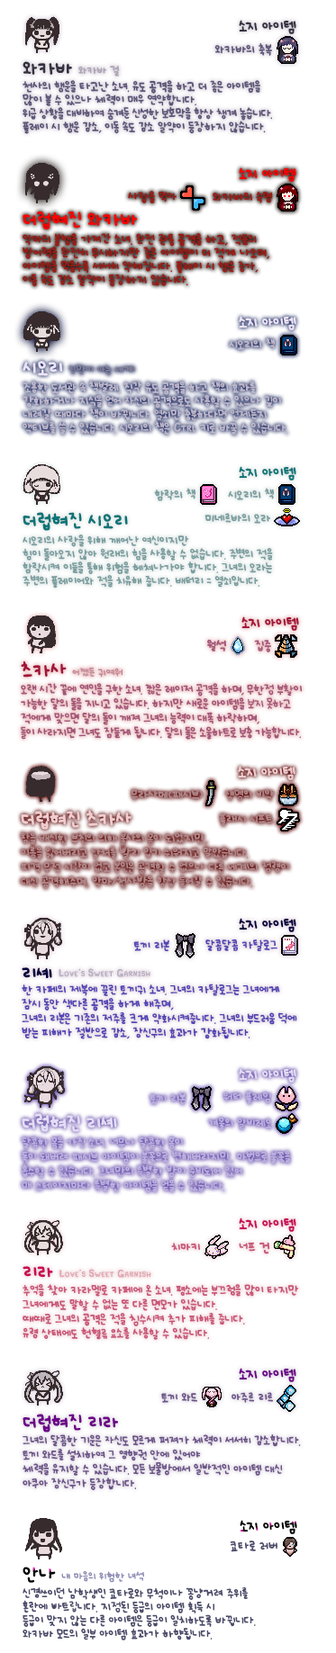
<style>
.page{position:relative;width:336px;height:1653px;background:#ffffff}
.page>*{position:absolute;margin:0}
.t1{font:10.8px "UhBeeSe_hyunBold";color:#34323f}
.t2{font:10.8px "UhBeeSe_hyunBold";letter-spacing:-0.2em;color:#34323f}
.t3{font:9px "UhBeeSe_hyunBold";color:#5b5577}
.t4{font:9px/13.5px "UhBeeSe_hyunBold";letter-spacing:-0.025em;color:#5b5577}
.t5{font:14.4px/20.7px "UhBeeSe_hyunBold";color:#34323f}
.t6{font:8.1px/20.7px "UhBeeSe_hyunBold";color:#aba4b4}
.t7{font:9px/13.5px "UhBeeSe_hyunBold";letter-spacing:-0.05em;color:#5b5577}
.t8{font:10.8px "UhBeeSe_hyunBold";color:#ff0000}
.t9{font:10.8px "UhBeeSe_hyunBold";letter-spacing:-0.2em;color:#ff0000}
.t10{font:9px "UhBeeSe_hyunBold";color:#9a1a15}
.t11{font:9px/13.5px "UhBeeSe_hyunBold";color:#9a1a15}
.t12{font:14.4px/22.5px "UhBeeSe_hyunBold";color:#ff0000}
.t13{font:14.4px/22.5px "UhBeeSe_hyun";color:#ff0000}
.t14{font:10.8px "UhBeeSe_hyunBold";color:#ece4f9}
.t15{font:10.8px "UhBeeSe_hyunBold";letter-spacing:-0.2em;color:#ece4f9}
.t16{font:10.8px "UhBeeSe_hyunBold";color:#0a7577}
.t17{font:10.8px "UhBeeSe_hyunBold";letter-spacing:-0.2em;color:#0a7577}
.t18{font:9px "UhBeeSe_hyunBold";color:#7a9d9e}
.t19{font:9px/13.5px "UhBeeSe_hyunBold";letter-spacing:-0.025em;color:#7a9d9e}
.t20{font:14.4px/22.5px "UhBeeSe_hyunBold";color:#0a7577}
.t21{font:14.4px/22.5px "UhBeeSe_hyunBold";letter-spacing:0.1em;color:#0a7577}
.t22{font:9px/13.5px "UhBeeSe_hyunBold";letter-spacing:-0.159em;color:#7a9d9e}
.t23{font:10.8px "UhBeeSe_hyunBold";color:#a21439}
.t24{font:10.8px "UhBeeSe_hyunBold";letter-spacing:-0.2em;color:#a21439}
.t25{font:9.9px "UhBeeSe_hyunBold";color:#a25577}
.t26{font:9px/14.4px "UhBeeSe_hyunBold";letter-spacing:-0.05em;color:#a25577}
.t27{font:14.4px/21.6px "UhBeeSe_hyunBold";color:#a21439}
.t28{font:8.1px/20.7px "UhBeeSe_hyunBold";color:#c28997}
.t29{font:9px/14.4px "UhBeeSe_hyun";letter-spacing:-0.05em;color:#a25577}
.t30{font:10.8px "UhBeeSe_hyunBold";color:#f0ccce}
.t31{font:10.8px "UhBeeSe_hyunBold";letter-spacing:-0.2em;color:#f0ccce}
.t32{font:10.8px "UhBeeSe_hyunBold";color:#00003d}
.t33{font:10.8px "UhBeeSe_hyunBold";letter-spacing:-0.2em;color:#00003d}
.t34{font:9px "UhBeeSe_hyunBold";color:#5145b4}
.t35{font:9px "UhBeeSe_hyunBold";letter-spacing:-0.1em;color:#5145b4}
.t36{font:9px/14.4px "UhBeeSe_hyunBold";letter-spacing:-0.025em;color:#5145b4}
.t37{font:14.4px/20.7px "UhBeeSe_hyunBold";color:#00003d}
.t38{font:10.8px/20.7px "Font_soulsV2_Title-Regular";color:#b7b0c1;font-variant:small-caps}
.t39{font:10.8px "UhBeeSe_hyunBold";color:#c90d57}
.t40{font:10.8px "UhBeeSe_hyunBold";letter-spacing:-0.2em;color:#c90d57}
.t41{font:9px "UhBeeSe_hyunBold";color:#c95577}
.t42{font:9px/14.4px "UhBeeSe_hyunBold";letter-spacing:-0.025em;color:#c95577}
.t43{font:14.4px/20.7px "UhBeeSe_hyunBold";color:#c90d57}
.t44{font:10.8px/16.2px "Font_soulsV2_Title-Regular";color:#e0a8b2;font-variant:small-caps}
.t45{font:10.8px "UhBeeSe_hyunBold";color:#6c0088}
.t46{font:10.8px "UhBeeSe_hyunBold";letter-spacing:-0.2em;color:#6c0088}
.t47{font:9px "UhBeeSe_hyunBold";color:#6c5588}
.t48{font:9px "UhBeeSe_hyunBold";letter-spacing:-0.1em;color:#6c5588}
.t49{font:9px/14.4px "UhBeeSe_hyunBold";letter-spacing:-0.025em;color:#6c5588}
.t50{font:14.4px/20.7px "UhBeeSe_hyunBold";color:#6c0088}
.t51{font:9px/14.4px "UhBeeSe_hyunBold";letter-spacing:-0.15em;color:#6c5588}
.t52{font:10.8px "UhBeeSe_hyunBold";color:#000000}
.t53{font:10.8px "UhBeeSe_hyunBold";letter-spacing:-0.2em;color:#000000}
.t54{font:9px "UhBeeSe_hyunBold";color:#4c4d6b}
.t55{font:9px/13.5px "UhBeeSe_hyunBold";letter-spacing:-0.025em;color:#4c4d6b}
.t56{font:14.4px/21.6px "UhBeeSe_hyunBold";color:#000000}
.t57{font:8.1px/21.6px "UhBeeSe_hyunBold";color:#9090b6}
.t58{font:9px/13.5px "UhBeeSe_hyun";letter-spacing:-0.025em;color:#4c4d6b}
</style>
<div class="page">
<p class="t1" style="left:239px;top:20px;width:57px;height:14px"><span class="t2">소</span>지 아이템</p>
<p class="t3" style="left:214px;top:43px;width:58px;height:13px">와카바의 축복</p>
<p class="t4" style="left:23px;top:61px;width:249px;height:73px"><span class="t5">와카바 </span><span class="t6">와카바 걸<br></span>천사의 행운을 타고난 소녀. 유도 공격을 하고 더 좋은 아이템을<br>많이 볼 수 있으나 체력이 매우 연약합니다.<br><span class="t7">위급 상황을 대비하여 숨겨둔 신성한 보호막을 항상 챙겨 놓습니다.</span><br>플레이 시 행운 감소, 이동 속도 감소 알약이 등장하지 않습니다.</p>
<p class="t8" style="left:239px;top:167px;width:57px;height:15px"><span class="t9">소</span>지 아이템</p>
<p class="t10" style="left:128px;top:191px;width:48px;height:12px">사랑을 먹자</p>
<p class="t10" style="left:212px;top:192px;width:61px;height:11px">와카바의 숙명</p>
<p class="t11" style="left:23px;top:211px;width:246px;height:76px"><span class="t12">더</span><span class="t13">럽</span><span class="t12">혀진 와카바<br></span>악마의 불행을 가져간 소녀. 완전 관통 공격을 하고, 적들의<br>방어력을 완전히 무시하지만 좋은 아이템이 더 적게 나오며,<br>아이템을 먹을수록 서서히 약해집니다. 플레이 시 행운 증가, <br>이동 속도 감소 알약이 등장하지 않습니다.</p>
<p class="t14" style="left:239px;top:316px;width:57px;height:14px"><span class="t15">소</span>지 아이템</p>
<p class="t16" style="left:239px;top:466px;width:57px;height:15px"><span class="t17">소</span>지 아이템</p>
<p class="t18" style="left:154px;top:488px;width:42px;height:13px">함락의 책</p>
<p class="t18" style="left:228px;top:488px;width:47px;height:12px">시오리의 책</p>
<p class="t19" style="left:23px;top:512px;width:250px;height:77px"><span class="t20">더럽혀진 </span><span class="t21">시</span><span class="t20">오리<br></span>시오리의 사랑을 위해 깨어난 여신이지만<br>힘이 돌아오지 않아 원래의 힘을 사용할 수 없습니다. <span class="t22">주</span>변의 적을<br>함락시켜 이들을 통해 위험을 헤쳐나가야 합니다. 그녀의 오라는<br>주변의 플레이어와 적을 치유해 줍니다. 배터리 = 열쇠입니다.</p>
<p class="t18" style="left:204px;top:513px;width:66px;height:11px">미네르바의 오라</p>
<p class="t23" style="left:241px;top:617px;width:58px;height:14px"><span class="t24">소</span>지 아이템</p>
<p class="t25" style="left:207px;top:639px;width:20px;height:13px">월석</p>
<p class="t25" style="left:254px;top:640px;width:17px;height:13px">집중</p>
<p class="t26" style="left:21px;top:661px;width:281px;height:79px"><span class="t27">츠카사 </span><span class="t28">어쨌든 귀여워<br></span>오랜 시간 끝에 연인을 구한 소녀. 짧은 레이저 <span class="t29">공격</span>을 하며, 무한정 부<span class="t29">활</span>이 가능한 달의 돌을 지니고 있습니다. 하지만 새로운 아이템을 <span class="t29">보지 못하고<br></span>적에게 맞으면 달의 돌이 깨져 그녀의 능력이 대폭 하락하며,<br><span class="t29">돌</span>이 사라지면 그녀도 잠들게 됩니다. 달의 돌은 소울하트로 보충 가능합니다.</p>
<p class="t30" style="left:238px;top:766px;width:57px;height:14px"><span class="t31">소</span>지 아이템</p>
<p class="t32" style="left:239px;top:918px;width:57px;height:14px"><span class="t33">소</span>지 아이템</p>
<p class="t34" style="left:133px;top:940px;width:36px;height:12px"><span class="t35">토</span>끼 리본</p>
<p class="t34" style="left:205px;top:940px;width:72px;height:11px">달콤달콤 카탈로그</p>
<p class="t36" style="left:22px;top:968px;width:275px;height:72px"><span class="t37">리셰 </span><span class="t38">Love’s Sweet Garnish<br></span>한 카페의 제복에 끌린 토끼귀 소녀. 그녀의 카탈로그는 그녀에게<br>잠시 동안 색다른 공격을 하게 해주며,<br>그녀의 리본은 기존의 저주를 크게 약화시켜줍니다. 그녀의 부드러움 덕에<br>받는 피해가 절반으로 감소, 장신구의 효과가 강화됩니다.</p>
<p class="t39" style="left:239px;top:1218px;width:57px;height:14px"><span class="t40">소</span>지 아이템</p>
<p class="t41" style="left:171px;top:1243px;width:30px;height:8px">치마키</p>
<p class="t41" style="left:239px;top:1242px;width:31px;height:13px">너프 건</p>
<p class="t42" style="left:23px;top:1266px;width:276px;height:74px"><span class="t43">리라 </span><span class="t44">Love’s Sweet Garnish<br></span>추억을 찾아 카라멜로 카페에 온 소녀. 평소에는 부끄럼을 많이 타지만<br>그녀에게도 말할 수 없는 또 다른 면모가 있습니다.<br>때때로 그녀의 공격은 적을 침수시켜 추가 피해를 줍니다.<br>유령 상태에도 헌혈류 요소를 사용할 수 있습니다.</p>
<p class="t45" style="left:239px;top:1368px;width:57px;height:14px"><span class="t46">소</span>지 아이템</p>
<p class="t47" style="left:161px;top:1393px;width:36px;height:10px"><span class="t48">토</span>끼 와드</p>
<p class="t47" style="left:231px;top:1392px;width:43px;height:11px">아주르 리르</p>
<p class="t49" style="left:23px;top:1414px;width:278px;height:76px"><span class="t50">더럽혀진 리라<br></span>그녀의 달콤한 기운은 자신도 모르게 퍼져가 체력이 서서히 감소합니다.<br><span class="t51">토</span>끼 와드를 설치하여 그 영향권 안에 있어야<br>체력을 유지할 수 있습니다. 모든 보물방에서 일반적인 아이템 대신 <br>아쿠아 장신구가 등장합니다.</p>
<p class="t52" style="left:239px;top:1520px;width:58px;height:15px"><span class="t53">소</span>지 아이템</p>
<p class="t54" style="left:230px;top:1541px;width:48px;height:12px">쿄타로 러버</p>
<p class="t55" style="left:23px;top:1567px;width:233px;height:74px"><span class="t56">안나 </span><span class="t57">내 마음의 위험한 녀석<br></span>신경쓰이던 남학생인 쿄타로와 무척이나 꽁냥거려 주위를<br>혼란에 빠트<span class="t58">립</span>니다. 지정된 등급의 아이템 획득 시<br>등급이 맞지 않는 다른 아이템은 등급이 일치하도록 바뀝니다.<br>와카바 모드의 일부 아이템 효과가 하향됩니다.</p>
</div>
